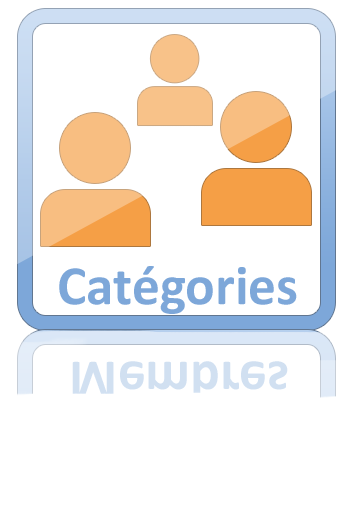
<style>
.page{position:relative;width:350px;height:525px;background:#ffffff}
.page>*{position:absolute;margin:0}
.t1{font:55.4px "Calibri-Bold";color:#7da7d9}
.t2{font:57.3px "Calibri-Bold";color:#d1e0f1;scale:0.97 1}
</style>
<div class="page">
<p class="t1" style="left:59px;top:266px;width:238px;height:48px">Catégories</p>
<p class="t2" style="left:72px;top:361px;width:216px;height:40px">Membres</p>
</div>
